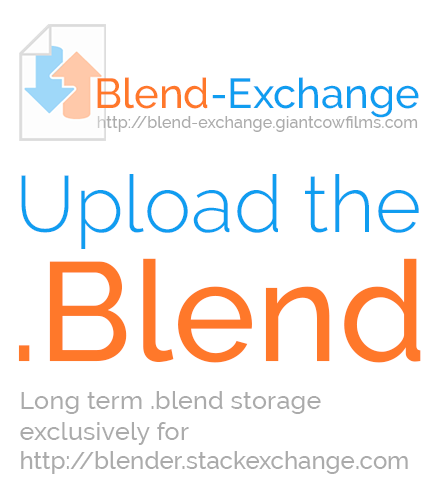
<style>
.page{position:relative;width:440px;height:500px;background:#ffffff}
.page>*{position:absolute;margin:0}
.t1{font:41.8px "Raleway-Medium";color:#109df0}
.t2{font:41.8px "Raleway-Medium";color:#ff782a}
.t3{font:16.2px "Raleway-Medium";color:#ababab}
.t4{font:79.6px "Raleway-Light";color:#109df0}
.t5{font:140.4px "Raleway-Medium";color:#ff782a}
.t6{font:25.4px "Raleway-Medium";color:#ababab}
.t7{font:24px "Raleway-Medium";color:#ababab}
</style>
<div class="page">
<p class="t1" style="left:97px;top:77px;width:322px;height:41px"><span class="t2">Blend</span>-Exchange</p>
<p class="t3" style="left:97px;top:116px;width:321px;height:16px">http://blend-exchange.giantcowfilms.com</p>
<p class="t4" style="left:21px;top:174px;width:398px;height:75px">Upload the</p>
<p class="t5" style="left:18px;top:258px;width:403px;height:105px">.Blend</p>
<p class="t6" style="left:20px;top:391px;width:388px;height:83px">Long term .blend storage  <br>exclusively for  <br><span class="t7">http://blender.stackexchange.com</span></p>
</div>
